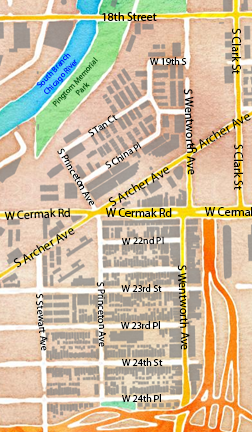
<style>
.page{position:relative;width:252px;height:432px}
.page>*{position:absolute;margin:0}
.t1{font:12px "MyriadPro-Regular";color:#000000}
.t2{font:8px "MyriadPro-Regular";color:#0021f7}
.t3{font:8px "MyriadPro-Regular";color:#0a5d12}
.t4{font:10px "MyriadPro-Regular";color:#000000}
.t5{font:13px "MyriadPro-Regular";color:#000000}
</style>
<div class="page">
<p class="t1" style="left:232px;top:28px;width:9px;height:46px;rotate:90deg">S Clark St</p>
<p class="t2" style="left:36px;top:53px;width:41px;height:41px;text-align:center;rotate:-48deg">South Branch<br>Chicago River</p>
<p class="t3" style="left:52px;top:57px;width:46px;height:50px;text-align:center;rotate:-48deg">Pingtom Memorial<br>Park</p>
<p class="t4" style="left:150px;top:57px;width:37px;height:8px">W 19th S</p>
<p class="t1" style="left:183px;top:89px;width:13px;height:86px;rotate:88deg">S Wentworth Ave</p>
<p class="t4" style="left:88px;top:114px;width:30px;height:23px;rotate:-34deg">S Tan Ct</p>
<p class="t5" style="left:189px;top:114px;width:62px;height:40px;rotate:-31deg">S Archer Ave</p>
<p class="t4" style="left:57px;top:148px;width:37px;height:58px;rotate:60deg">S Princeton Ave</p>
<p class="t4" style="left:105px;top:142px;width:37px;height:27px;rotate:-32deg">S China Pl</p>
<p class="t1" style="left:234px;top:144px;width:9px;height:46px;rotate:90deg">S Clark St</p>
<p class="t5" style="left:108px;top:167px;width:62px;height:40px;rotate:-31deg">S Archer Ave</p>
<p class="t1" style="left:4px;top:208px;width:66px;height:12px;rotate:-3deg">W Cermak Rd</p>
<p class="t1" style="left:105px;top:208px;width:67px;height:9px">W Cermak Rd</p>
<p class="t5" style="left:13px;top:228px;width:62px;height:40px;rotate:-31deg">S Archer Ave</p>
<p class="t4" style="left:121px;top:236px;width:43px;height:10px;rotate:-2deg">W 22nd Pl</p>
<p class="t1" style="left:177px;top:265px;width:13px;height:85px;rotate:88deg">S Wentworth Ave</p>
<p class="t4" style="left:36px;top:293px;width:12px;height:58px;rotate:84deg">S Stewart Ave</p>
<p class="t4" style="left:96px;top:282px;width:10px;height:65px;rotate:88deg">S Princeton Ave</p>
<p class="t4" style="left:121px;top:284px;width:41px;height:8px">W 23rd St</p>
<p class="t4" style="left:121px;top:321px;width:39px;height:8px">W 23rd Pl</p>
<p class="t4" style="left:122px;top:358px;width:41px;height:8px">W 24th St</p>
<p class="t4" style="left:122px;top:394px;width:39px;height:8px">W 24th Pl</p>
</div>
